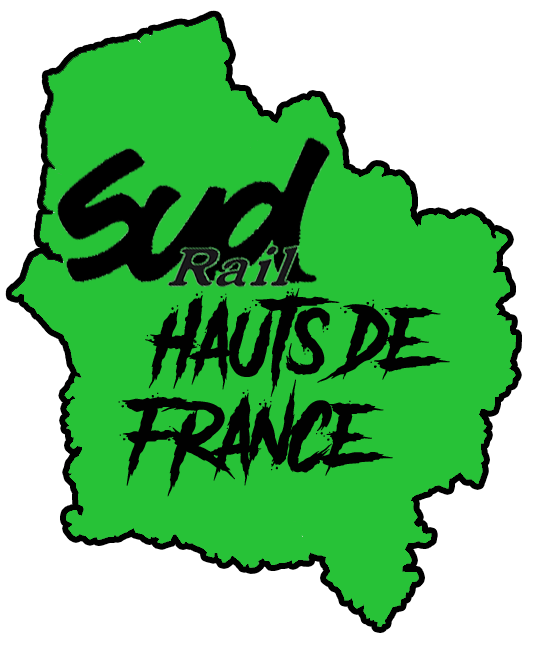
<style>
.page{position:relative;width:550px;height:650px;background:#ffffff}
.page>*{position:absolute;margin:0}
.t1{font:80px "AnotherDangerDemo";color:#010101}
.t2{font:72px "AnotherDangerDemo";color:#00ff1e}
</style>
<div class="page">
<p class="t1" style="left:118px;top:288px;width:332px;height:209px"><span class="t2"><br>  </span>hauts de <br> france</p>
</div>
